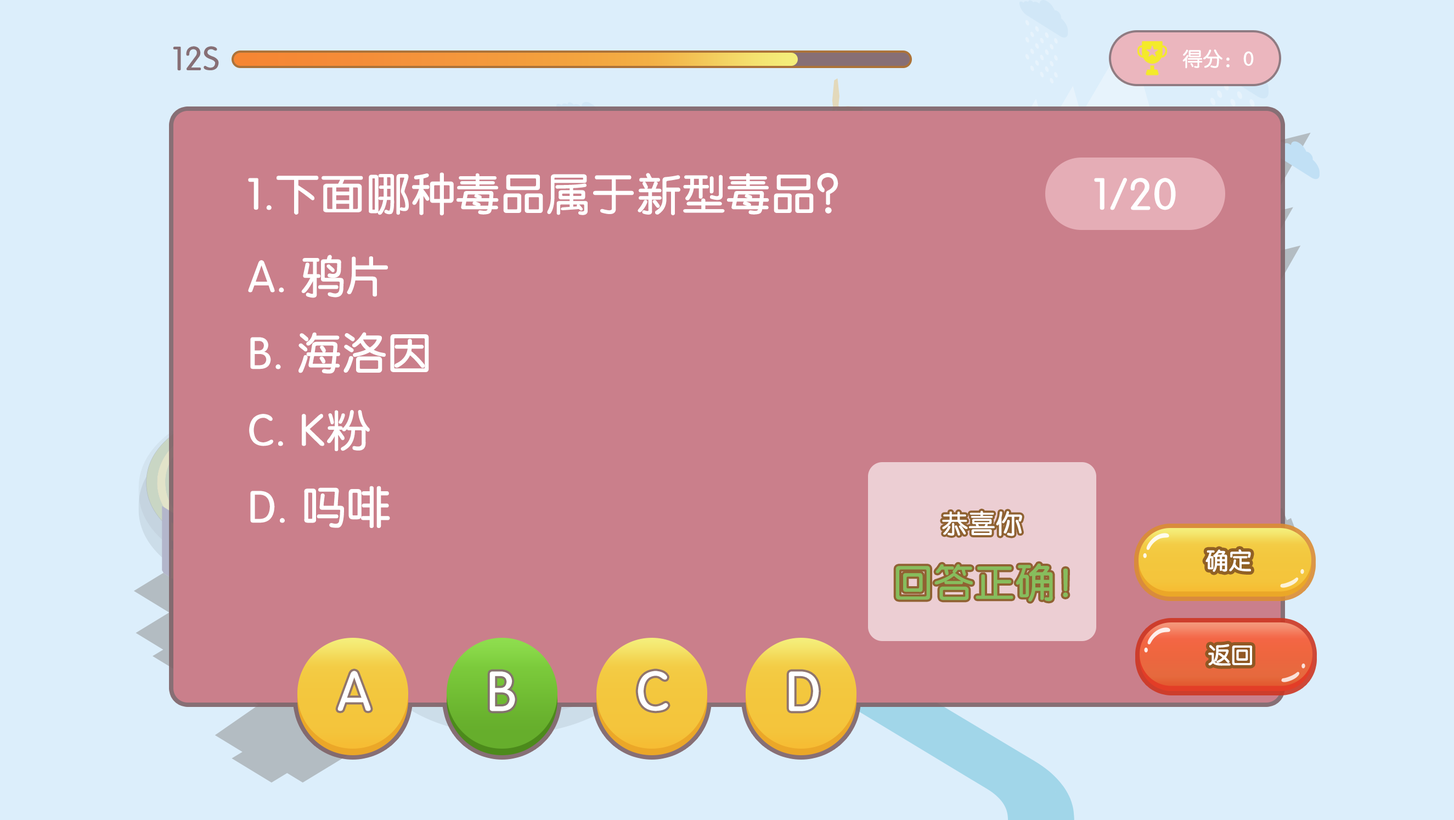
<style>
.page{position:relative;width:1454px;height:820px;background:#ca7f8b}
.page>*{position:absolute;margin:0}
.t1{font:32.9px "JZunYuan";color:#876f75;font-weight:bold}
.t2{font:19.8px "JZunYuan";color:#ffffff;font-weight:bold}
.t3{font:43.9px "JZunYuan";color:#ffffff;font-weight:bold}
.t4{font:26.3px "JZunYuan";color:#ffffff;font-weight:bold}
.t5{font:19.8px "JZunYuan";color:#66ae2c;font-weight:bold}
.t6{font:22.9px "JZunYuan";color:#ffffff;font-weight:bold}
.t7{font:39.5px "JZunYuan";color:#87bd5d;font-weight:bold}
.t8{font:54.9px "JZunYuan";color:#ffffff;font-weight:bold}
</style>
<div class="page">
<p class="t1" style="left:173px;top:46px;width:46px;height:25px">12S</p>
<p class="t2" style="left:1183px;top:49px;width:71px;height:20px">得分：0</p>
<p class="t3" style="left:248px;top:172px;width:591px;height:44px">1.下面哪种毒品属于新型毒品？</p>
<p class="t3" style="left:1094px;top:178px;width:82px;height:32px">1/20</p>
<p class="t3" style="left:248px;top:255px;width:181px;height:273px">A. 鸦片<br>B. 海洛因<br>C. K粉<br>D. 吗啡</p>
<p class="t4" style="left:942px;top:510px;width:80px;height:26px"><span class="t5">  </span>恭喜你</p>
<p class="t6" style="left:1206px;top:549px;width:45px;height:23px">确定</p>
<p class="t7" style="left:896px;top:563px;width:173px;height:38px">回答正确！</p>
<p class="t6" style="left:1208px;top:644px;width:45px;height:22px">返回</p>
<p class="t8" style="left:338px;top:671px;width:33px;height:40px">A</p>
<p class="t8" style="left:490px;top:671px;width:25px;height:40px">B</p>
<p class="t8" style="left:638px;top:671px;width:30px;height:40px">C</p>
<p class="t8" style="left:789px;top:671px;width:30px;height:40px">D</p>
</div>
